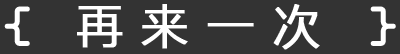
<style>
.page{position:relative;width:400px;height:54px;background:#333333}
.page>*{position:absolute;margin:0}
.t1{font:46px "MicrosoftYaHei";letter-spacing:0.4em;color:#ffffff;font-weight:bold}
</style>
<div class="page">
<p class="t1" style="left:77px;top:4px;width:243px;height:46px">再来一次</p>
</div>
